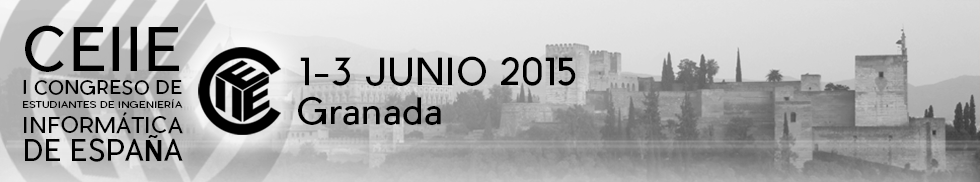
<style>
.page{position:relative;width:980px;height:182px}
.page>*{position:absolute;margin:0}
.t1{font:58.9px "PierSans-Regular";color:#000000}
.t2{font:36.8px "PierSans-Regular";color:#000000}
.t3{font:18.4px "PierSans-Regular";color:#000000}
.t4{font:8.7px "PierSans-Regular";color:#000000;scale:1.18 1}
.t5{font:35.7px "PierSans-Regular";color:#000000}
.t6{font:21.5px "PierSans-Regular";color:#000000}
.t7{font:29.2px "PierSans-Regular";color:#000000;scale:0.93 1}
.t8{font:29.2px "Arial-BoldMT";color:#000000;scale:0.93 1}
</style>
<div class="page">
<p class="t1" style="left:25px;top:25px;width:154px;height:47px">CEIIE</p>
<p class="t2" style="left:300px;top:56px;width:276px;height:30px">1-3 JUNIO 2015</p>
<p class="t3" style="left:23px;top:79px;width:159px;height:16px">I CONGRESO DE</p>
<p class="t4" style="left:23px;top:99px;width:160px;height:9px">ESTUDIANTES DE INGENIERÍA</p>
<p class="t5" style="left:298px;top:96px;width:143px;height:29px">Granada</p>
<p class="t6" style="left:24px;top:111px;width:159px;height:23px">INFORMÁTICA</p>
<p class="t7" style="left:25px;top:135px;width:158px;height:27px">DE ESPA<span class="t8">Ñ</span>A</p>
</div>
